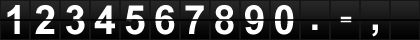
<style>
.page{position:relative;width:420px;height:40px}
.page>*{position:absolute;margin:0}
.t1{font:40px "Arial-BoldMT";letter-spacing:0.21em;color:#ffffff}
.t2{font:40px "Arial-BoldMT";letter-spacing:0.47em;color:#ffffff}
</style>
<div class="page">
<p class="t1" style="left:7px;top:5px;width:287px;height:30px">1234567890</p>
<p class="t2" style="left:312px;top:16px;width:66px;height:21px">.-,</p>
</div>
